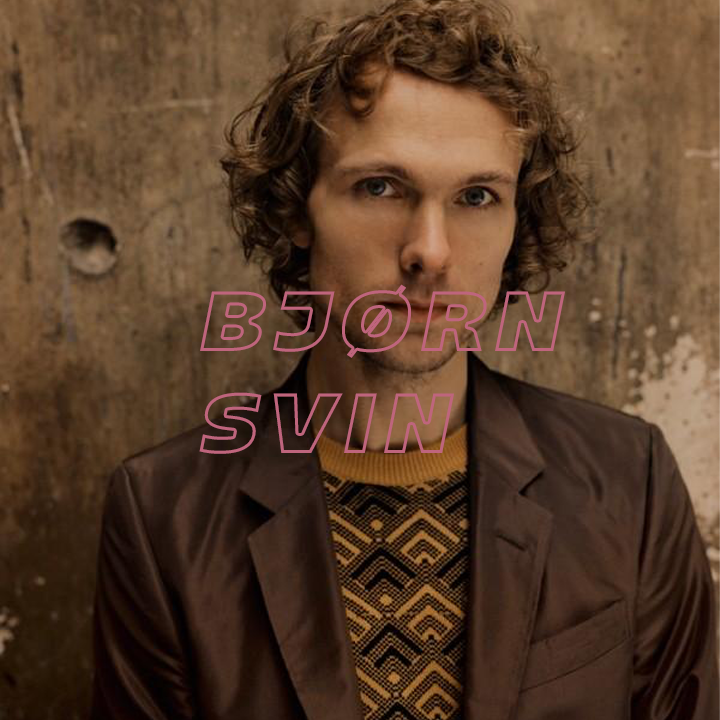
<style>
.page{position:relative;width:720px;height:720px}
.page>*{position:absolute;margin:0}
.t1{font:85px "Majoris-Italic";letter-spacing:0.1em;text-transform:uppercase}
</style>
<div class="page">
<p class="t1" style="left:199px;top:284px;width:366px;height:170px;text-align:right">BJØRN SVIN</p>
</div>
